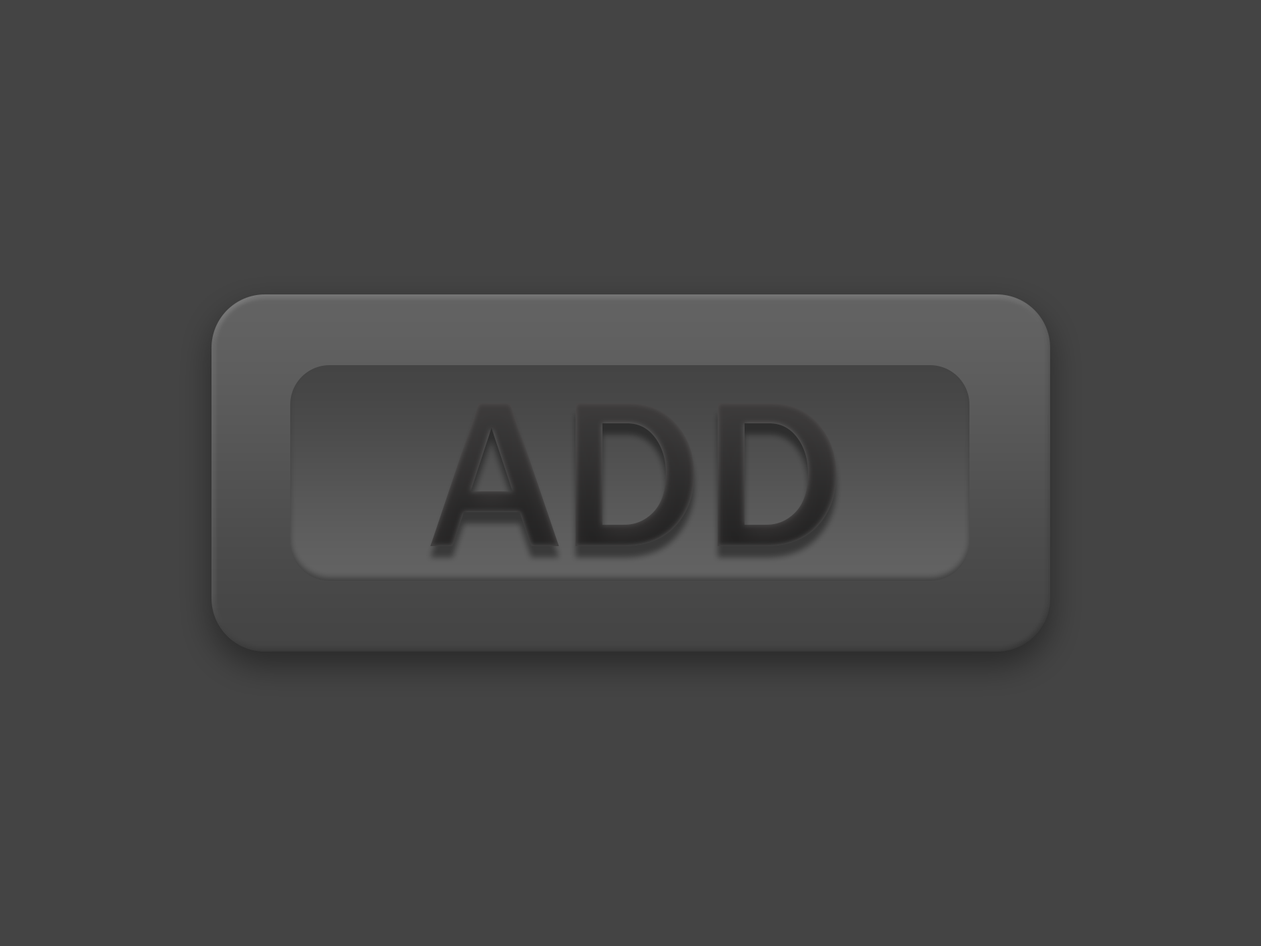
<style>
.page{position:relative;width:1261px;height:946px;background:#444444}
.page>*{position:absolute;margin:0}
.t1{font:214.2px "FranklinGothic-Medium";color:#343333}
</style>
<div class="page">
<p class="t1" style="left:430px;top:403px;width:407px;height:143px">ADD</p>
</div>
